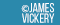
<style>
.page{position:relative;width:60px;height:25px;background:#2b89ac}
.page>*{position:absolute;margin:0}
.t1{font:13px/10.5px "BebasNeueRegular";color:#ffffff}
.t2{font:10px "Aleo-Bold";color:#ffffff}
</style>
<div class="page">
<p class="t1" style="left:21px;top:3px;width:34px;height:20px;text-align:right"><span class="t2">©</span>James<br>Vickery</p>
</div>
